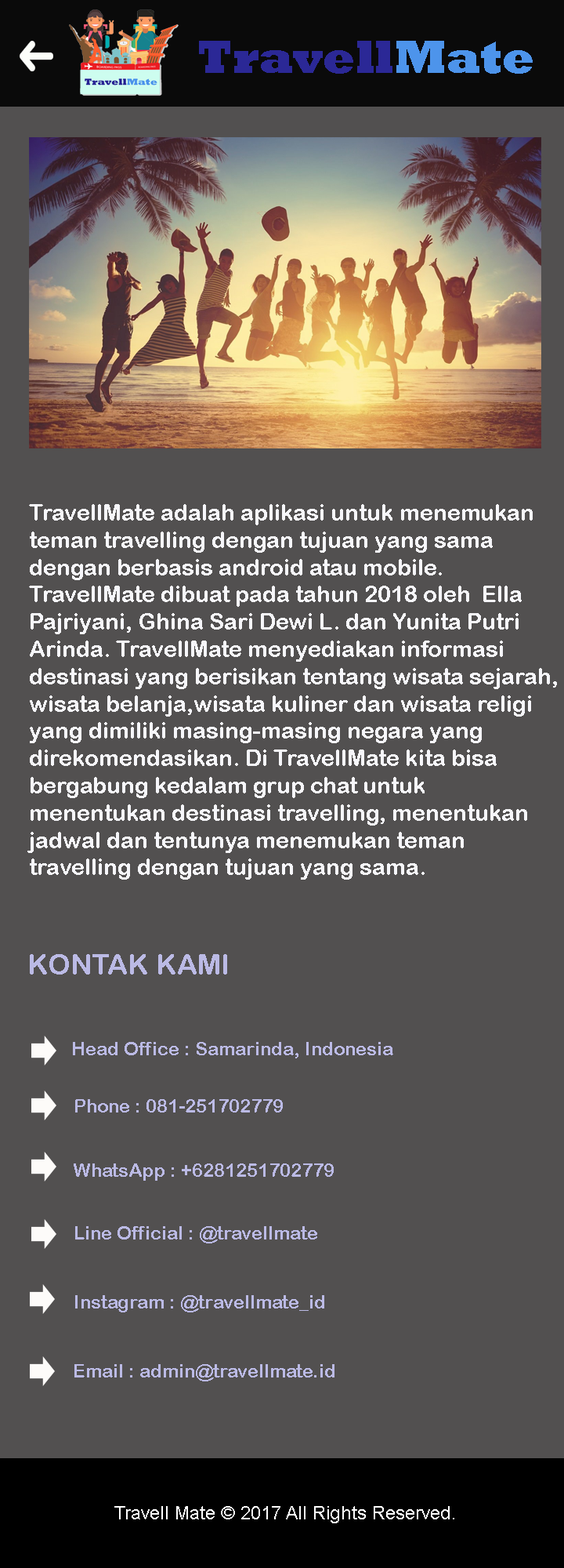
<style>
.page{position:relative;width:564px;height:1568px;background:#525050}
.page>*{position:absolute;margin:0}
.t1{font:47px "Rockwell-ExtraBold";color:#2b2896}
.t2{font:47px "Rockwell-ExtraBold";color:#4d94eb}
.t3{font:22.7px "ArialRoundedMTBold";color:#f6f6fa}
.t4{font:28.2px "ArialRoundedMTBold";color:#bbbae5}
.t5{font:18.8px "ArialRoundedMTBold";color:#bbbae5}
.t6{font:18.8px "ArialMT";color:#ffffff}
</style>
<div class="page">
<p class="t1" style="left:199px;top:41px;width:334px;height:33px">Travell<span class="t2">Mate</span></p>
<p class="t3" style="left:27px;top:504px;width:530px;height:376px">TravellMate adalah aplikasi untuk menemukan <br>teman travelling dengan tujuan yang sama <br>dengan berbasis android atau mobile. <br>TravellMate dibuat pada tahun 2018 oleh  Ella <br>Pajriyani, Ghina Sari Dewi L. dan Yunita Putri<br>Arinda. TravellMate menyediakan informasi <br>destinasi yang berisikan tentang wisata sejarah,<br>wisata belanja,wisata kuliner dan wisata religi <br>yang dimiliki masing-masing negara yang <br>direkomendasikan. Di TravellMate kita bisa <br>bergabung kedalam grup chat untuk <br>menentukan destinasi travelling, menentukan <br>jadwal dan tentunya menemukan teman <br>travelling dengan tujuan yang sama.</p>
<p class="t4" style="left:30px;top:954px;width:197px;height:21px">KONTAK KAMI</p>
<p class="t5" style="left:73px;top:1042px;width:321px;height:16px">Head Office : Samarinda, Indonesia</p>
<p class="t5" style="left:75px;top:1099px;width:208px;height:13px">Phone : 081-251702779</p>
<p class="t5" style="left:74px;top:1163px;width:260px;height:18px">WhatsApp : +6281251702779</p>
<p class="t5" style="left:75px;top:1226px;width:243px;height:17px">Line Official : @travellmate</p>
<p class="t5" style="left:75px;top:1295px;width:250px;height:17px">Instagram : @travellmate_id</p>
<p class="t5" style="left:74px;top:1364px;width:261px;height:17px">Email : admin@travellmate.id</p>
<p class="t6" style="left:114px;top:1506px;width:341px;height:17px">Travell Mate © 2017 All Rights Reserved.</p>
</div>
